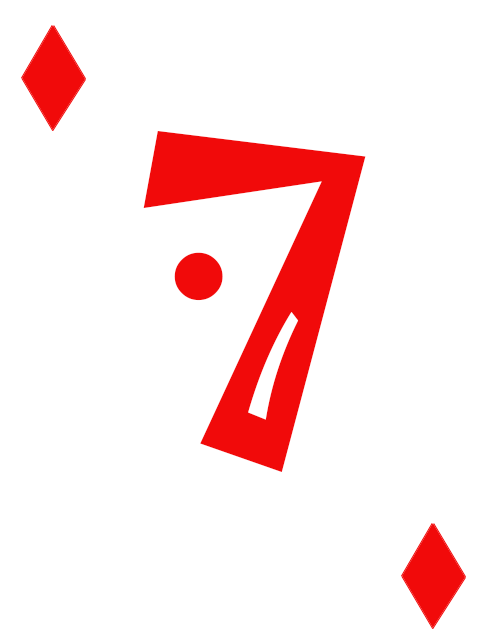
<style>
.page{position:relative;width:480px;height:640px;background:#ffffff}
.page>*{position:absolute;margin:0}
.t1{font:386.3px "Jokerman-Regular";color:#f10a0a}
</style>
<div class="page">
<p class="t1" style="left:143px;top:131px;width:223px;height:341px">7</p>
</div>
